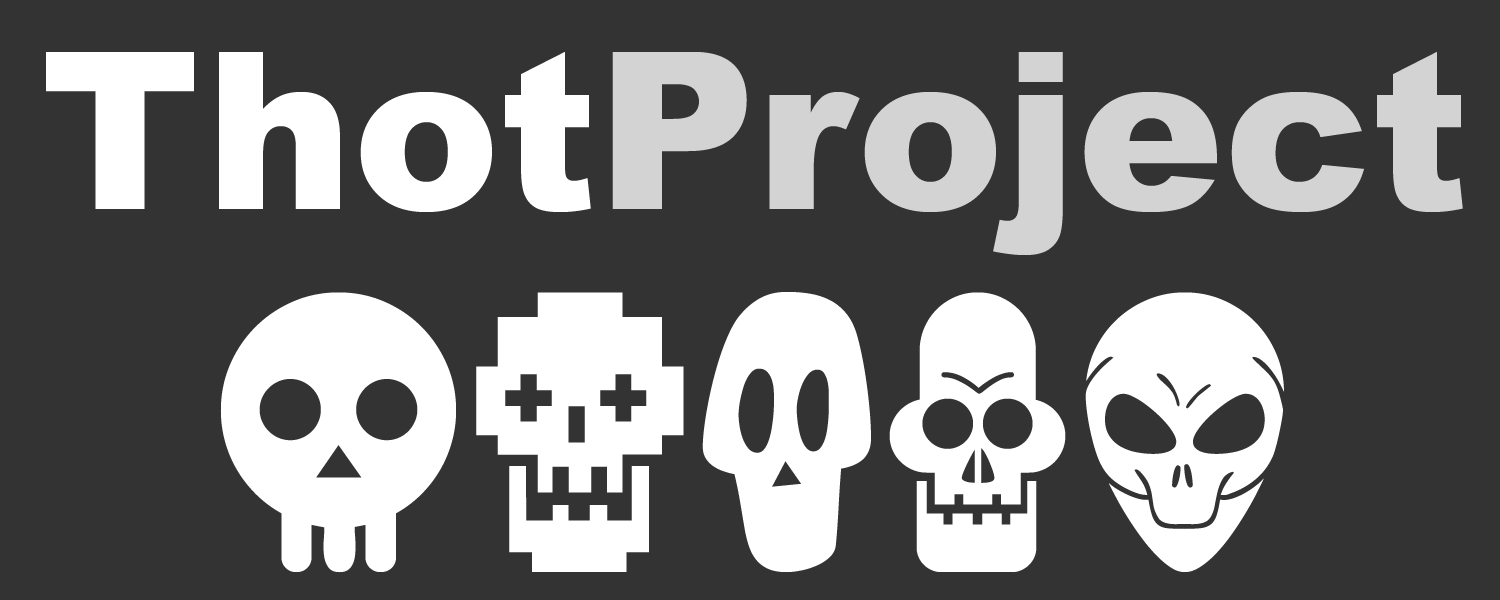
<style>
.page{position:relative;width:1500px;height:600px;background:#333333}
.page>*{position:absolute;margin:0}
.t1{font:220px "Arial-Black";color:#d3d3d3}
.t2{font:220px "Arial-Black";color:#ffffff}
.t3{font:400px "SkullBearerAOE";color:#ffffff}
</style>
<div class="page">
<p class="t1" style="left:46px;top:52px;width:1417px;height:203px"><span class="t2">Thot</span>Project</p>
<p class="t3" style="left:220px;top:292px;width:1064px;height:281px">fsmqy</p>
</div>
